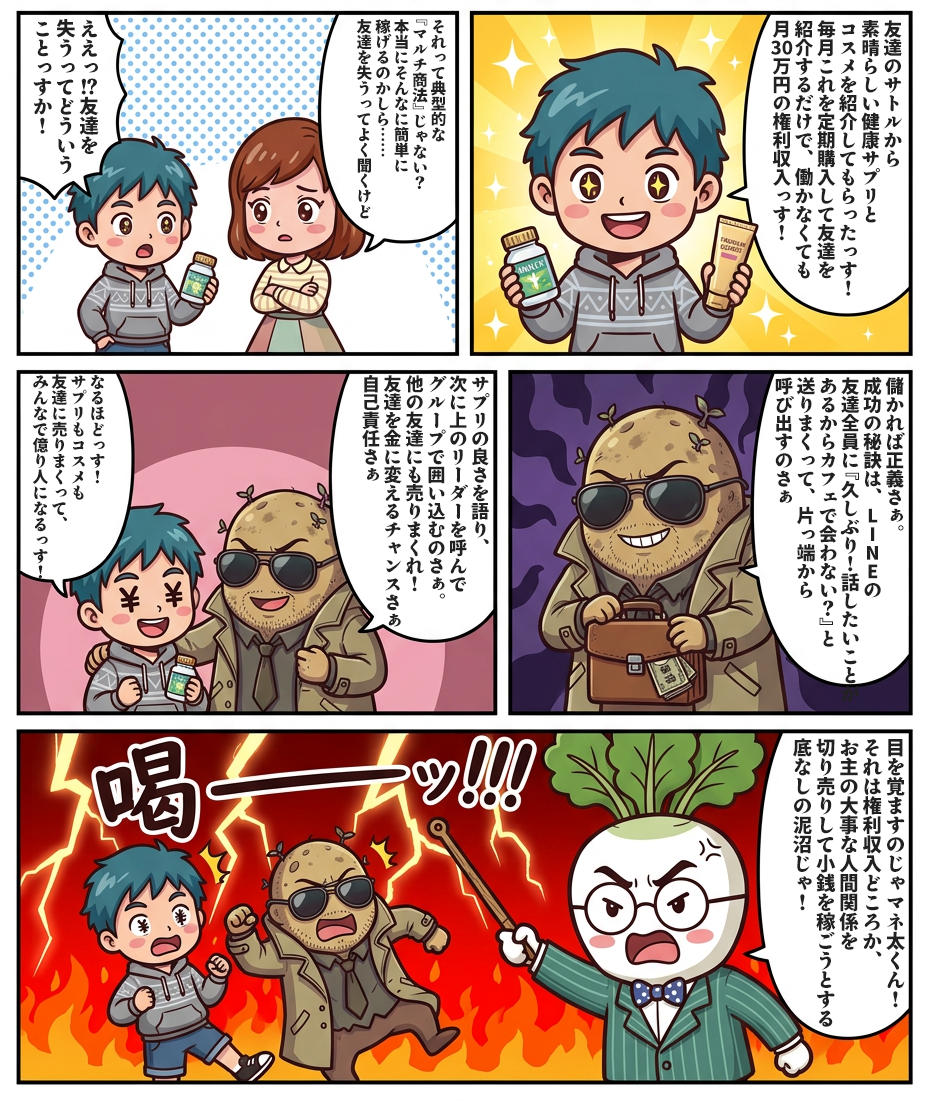
<style>
.page{position:relative;width:928px;height:1101px;background:#ffffff}
.page>*{position:absolute;margin:0}
.t1{font:19.5px "TenMinchoAntique-Heavy";color:#212121}
.t2{font:15.4px "TenMinchoAntique-Heavy";color:#212121}
.t3{font:18.5px "TenMinchoAntique-Heavy";color:#212121}
.t4{font:15.8px "TenMinchoAntique-Heavy";color:#212121}
.t5{font:18.2px "TenMinchoAntique-Heavy";color:#212121}
.t6{font:19.4px "TenMinchoAntique-Heavy";color:#212121}
</style>
<div class="page">
<p class="t1" style="left:33px;top:19px;width:66px;height:156px">ええっ！？友達を<br>失うってどういう<br>ことっすか！</p>
<p class="t2" style="left:356px;top:19px;width:91px;height:200px">それって典型的な<br>『マルチ商法』じゃない？<br>本当にそんなに簡単に<br>稼げるのかしら……<br>友達を失うってよく聞くけど</p>
<p class="t3" style="left:771px;top:20px;width:131px;height:276px">友達のサトルから<br>素晴らしい健康サプリと<br>コスメを紹介してもらったっす！<br>毎月これを定期購入して友達を<br>紹介するだけで、働かなくても<br>月30万円の権利収入っす！</p>
<p class="t4" style="left:32px;top:374px;width:73px;height:205px">なるほどっす！<br>サプリもコスメも<br>友達に売りまくって、<br>みんなで億り人になるっす！</p>
<p class="t5" style="left:362px;top:375px;width:128px;height:252px">サプリの良さを語り、<br>次に上のリーダーを呼んで<br>グループで囲い込むのさぁ。<br>他の友達にも売りまくれ！<br>友達を金に変えるチャンスさぁ<br>自己責任さぁ</p>
<p class="t3" style="left:775px;top:376px;width:130px;height:326px">儲かれば正義さぁ。<br>成功の秘訣は、LINEの<br>友達全員に『久しぶり！話したいことが<br>あるからカフェで会わない？』と<br>送りまくって、片っ端から<br>呼び出すのさぁ</p>
<p class="t6" style="left:793px;top:738px;width:112px;height:289px">目を覚ますのじゃマネ太くん！<br>それは権利収入どころか、<br>お主の大事な人間関係を<br>切り売りして小銭を稼ごうとする<br>底なしの泥沼じゃ！</p>
</div>
